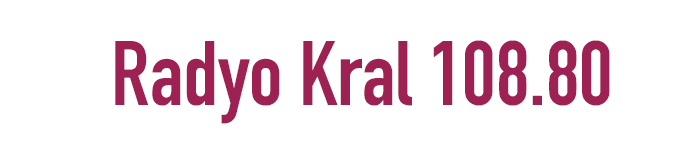
<style>
.page{position:relative;width:700px;height:150px;background:#ffffff}
.page>*{position:absolute;margin:0}
.t1{font:90px "DINCondensed-Bold";color:#9d2253}
</style>
<div class="page">
<p class="t1" style="left:115px;top:40px;width:495px;height:84px">Radyo Kral 108.80</p>
</div>
